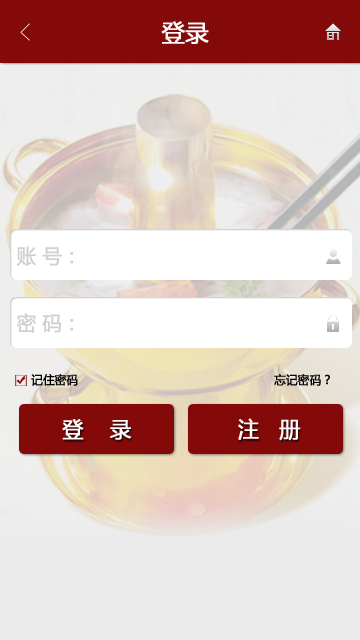
<style>
.page{position:relative;width:360px;height:640px}
.page>*{position:absolute;margin:0}
.t1{font:24px "MicrosoftYaHei";letter-spacing:-0.01em;color:#fefbfb;font-weight:bold;scale:0.96 1}
.t2{font:20px "MicrosoftYaHei";letter-spacing:-0.01em;color:#d1cfcf;font-weight:bold;scale:0.96 1}
.t3{font:12.1px "MicrosoftYaHei";letter-spacing:-0.01em;color:#030303;font-weight:bold;scale:0.96 1}
.t4{font:22px "MicrosoftYaHei";letter-spacing:-0.01em;color:#fefbfb;font-weight:bold;scale:0.96 1}
</style>
<div class="page">
<p class="t1" style="left:161px;top:21px;width:48px;height:23px">登录</p>
<p class="t2" style="left:16px;top:246px;width:58px;height:20px">账 号：</p>
<p class="t2" style="left:16px;top:313px;width:58px;height:20px">密 码：</p>
<p class="t3" style="left:31px;top:374px;width:47px;height:12px">记住密码</p>
<p class="t3" style="left:274px;top:374px;width:56px;height:12px">忘记密码？</p>
<p class="t4" style="left:62px;top:419px;width:70px;height:21px">登    录</p>
<p class="t4" style="left:238px;top:418px;width:63px;height:23px">注   册</p>
</div>
